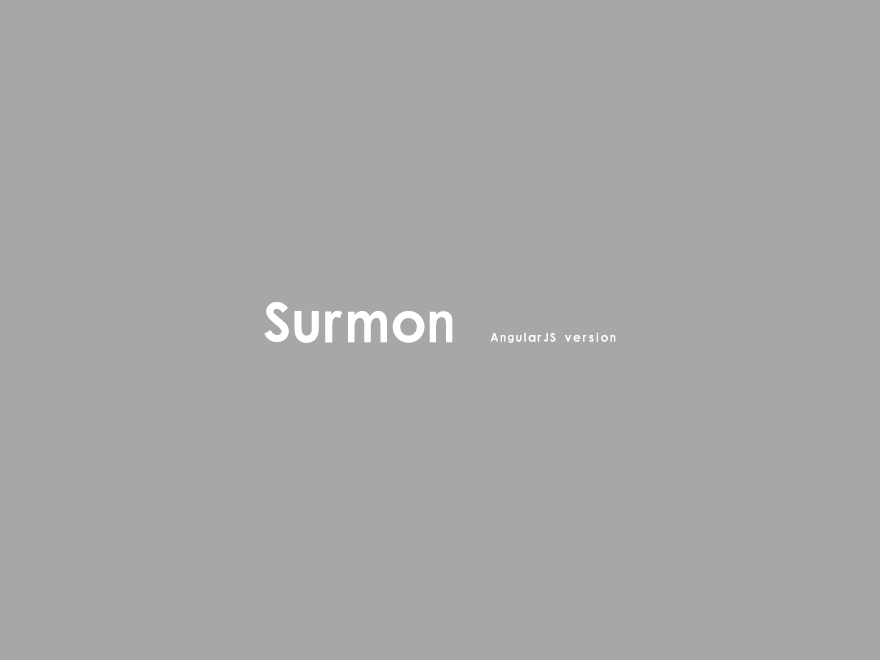
<style>
.page{position:relative;width:880px;height:660px;background:#a7a7a7}
.page>*{position:absolute;margin:0}
.t1{font:50.9px "¹ã½Ý¾ÓÃÔÄã×Ö¿â";color:#ffffff}
.t2{font:10.9px "¹ã½Ý¾ÓÃÔÄã×Ö¿â";letter-spacing:0.12em;color:#ffffff}
</style>
<div class="page">
<p class="t1" style="left:264px;top:302px;width:189px;height:41px">Surmon</p>
<p class="t2" style="left:490px;top:332px;width:126px;height:11px">AngularJS version</p>
</div>
